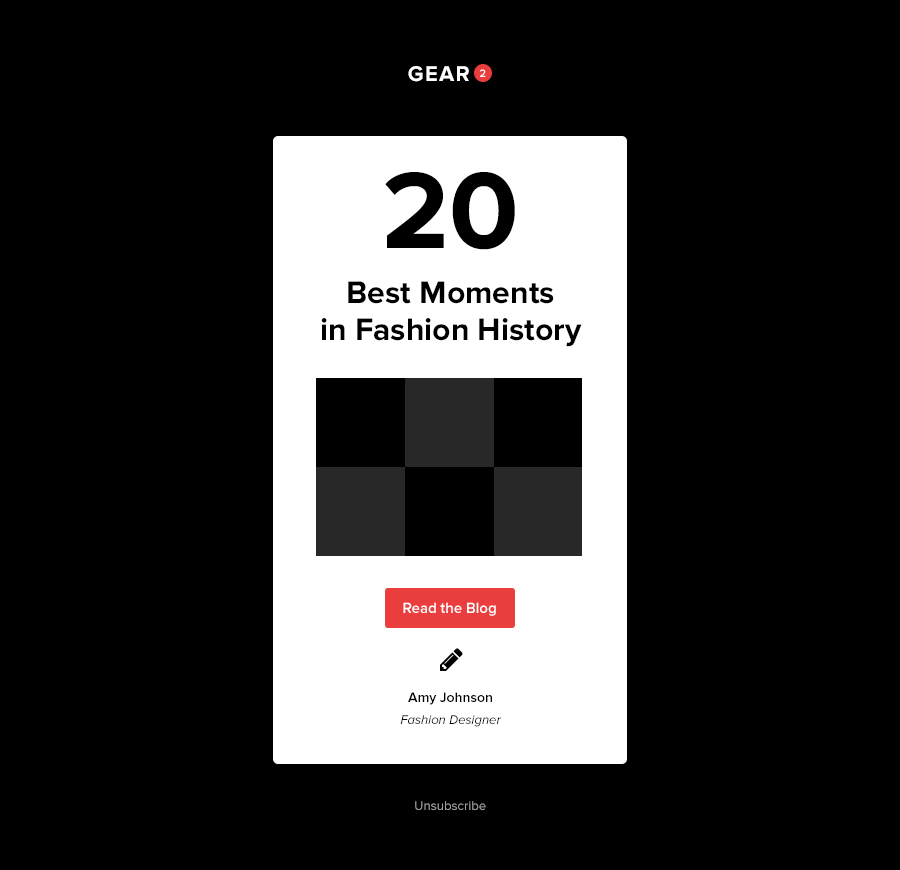
<style>
.page{position:relative;width:900px;height:870px;background:#000000}
.page>*{position:absolute;margin:0}
.t1{font:22px "ProximaNova-Bold";letter-spacing:0.06em;color:#ffffff;text-transform:uppercase}
.t2{font:11px "ProximaNova-Semibold";color:#fffefe}
.t3{font:112.4px "ProximaNova-Bold";color:#010101}
.t4{font:32.1px/32.1px "ProximaNova-Bold";color:#000000}
.t5{font:15px "ProximaNova-Semibold";color:#ffffff}
.t6{font:13px/22px "ProximaNova-RegularIt";color:#000000}
.t7{font:14px/22px "ProximaNova-Semibold";color:#000000}
.t8{font:13.1px "ProximaNova-Regular";color:#a3a3a3}
</style>
<div class="page">
<p class="t1" style="left:408px;top:66px;width:61px;height:16px">Gear</p>
<p class="t2" style="left:480px;top:69px;width:6px;height:8px">2</p>
<p class="t3" style="left:385px;top:172px;width:130px;height:78px">20</p>
<p class="t4" style="left:321px;top:281px;width:261px;height:66px;text-align:center">Best Moments<br>in Fashion History</p>
<p class="t5" style="left:403px;top:602px;width:93px;height:14px">Read the Blog</p>
<p class="t6" style="left:400px;top:692px;width:102px;height:35px;text-align:center"><span class="t7">Amy Johnson<br></span>Fashion Designer</p>
<p class="t8" style="left:415px;top:801px;width:71px;height:9px">Unsubscribe</p>
</div>
